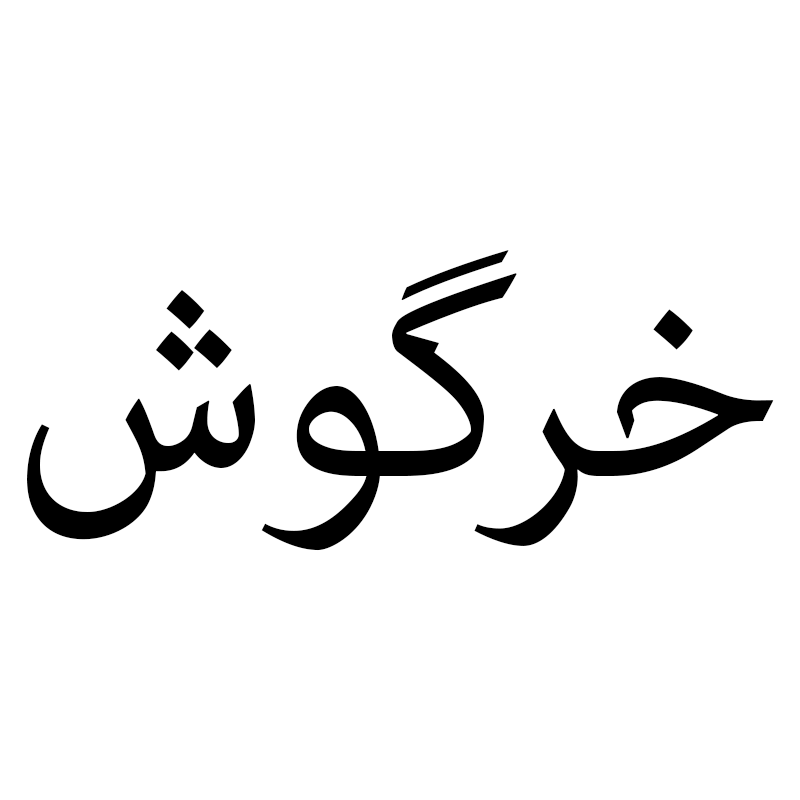
<style>
.page{position:relative;width:800px;height:800px;background:#ffffff}
.page>*{position:absolute;margin:0}
.t1{font:400px "AdobeArabic-Regular";color:#000000}
</style>
<div class="page">
<p class="t1" style="left:27px;top:250px;width:747px;height:301px">خرگوش</p>
</div>
